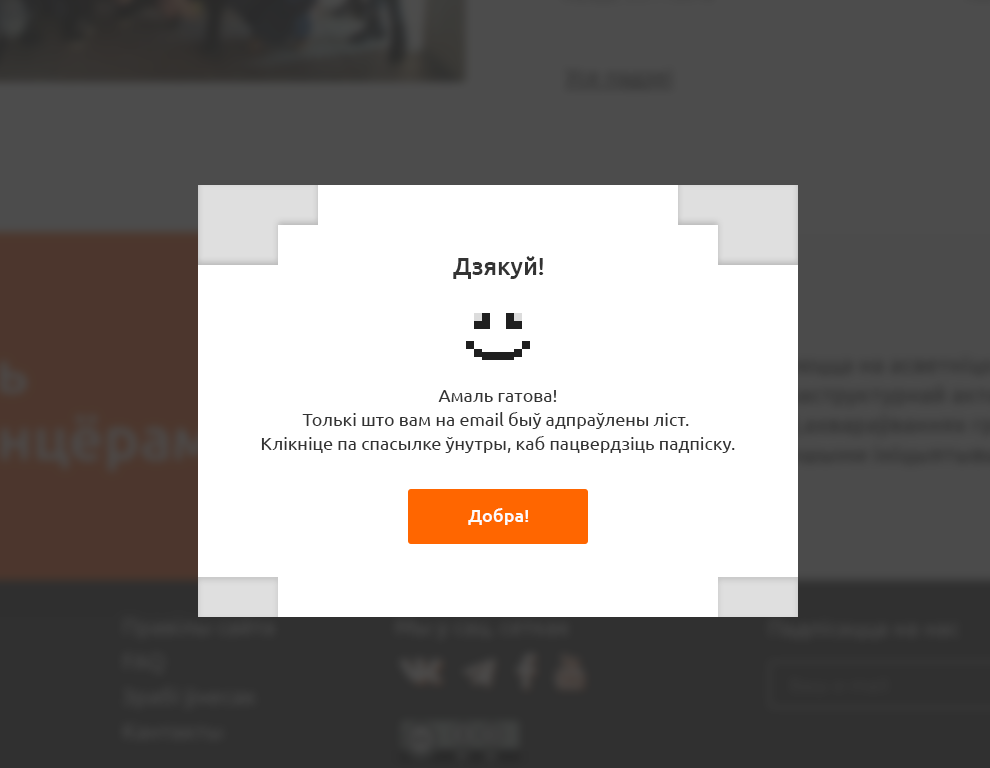
<style>
.page{position:relative;width:990px;height:768px;background:#ffffff}
.page>*{position:absolute;margin:0}
.t1{font:24px "Ubuntu-Medium";color:#333333}
.t2{font:18px/24px "Ubuntu-Regular";color:#333333}
.t3{font:18px "Ubuntu-Medium";color:#fbfbfb}
</style>
<div class="page">
<p class="t1" style="left:453px;top:256px;width:91px;height:23px">Дзякуй!</p>
<p class="t2" style="left:261px;top:390px;width:474px;height:63px;text-align:center">Амаль гатова!<br>Толькі што вам на email быў адпраўлены ліст. <br>Клікніце па спасылке ўнутры, каб пацвердзіць падпіску.</p>
<p class="t3" style="left:468px;top:508px;width:61px;height:17px">Добра!</p>
</div>
